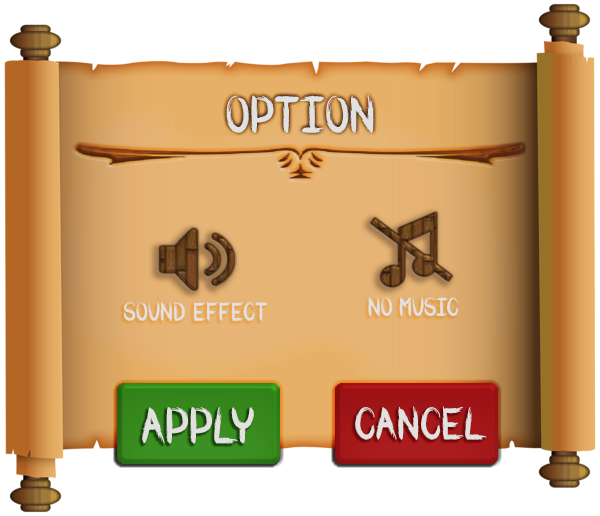
<style>
.page{position:relative;width:600px;height:516px;background:#ffffff}
.page>*{position:absolute;margin:0}
.t1{font:51px "WARBRUSH";color:#e3e0e0}
.t2{font:25.4px "WARBRUSH";color:#e3e0e0}
.t3{font:49.8px "WARBRUSH";color:#e3e0e0}
.t4{font:44.9px "WARBRUSH";color:#e3e0e0}
</style>
<div class="page">
<p class="t1" style="left:226px;top:95px;width:148px;height:39px">OPTION</p>
<p class="t2" style="left:124px;top:301px;width:144px;height:20px">SOUND EFFECT</p>
<p class="t2" style="left:368px;top:297px;width:90px;height:20px">NO MUSIC</p>
<p class="t3" style="left:142px;top:407px;width:112px;height:37px">APPLY</p>
<p class="t4" style="left:355px;top:406px;width:132px;height:34px">CANCEL</p>
</div>
